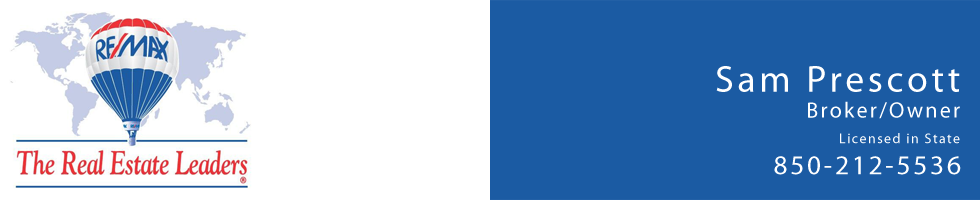
<style>
.page{position:relative;width:980px;height:200px;background:#1b5ba3}
.page>*{position:absolute;margin:0}
.t1{font:14.1px/25.9px "MyriadPro-Regular";letter-spacing:0.1em;color:#ffffff}
.t2{font:37.7px/25.9px "MyriadPro-Regular";letter-spacing:0.1em;color:#ffffff}
.t3{font:22.1px/25.9px "MyriadPro-Regular";letter-spacing:0.1em;color:#ffffff}
.t4{font:27.4px "MyriadPro-Regular";letter-spacing:0.1em;color:#ffffff}
</style>
<div class="page">
<p class="t1" style="left:716px;top:66px;width:244px;height:78px;text-align:right"><span class="t2">Sam Prescott<br></span><span class="t3">Broker/Owner<br></span>Licensed in State</p>
<p class="t4" style="left:774px;top:156px;width:187px;height:19px">850-212-5536</p>
</div>
